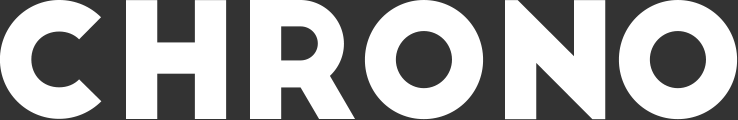
<style>
.page{position:relative;width:738px;height:120px;background:#ffffff}
.page>*{position:absolute;margin:0}
.t1{font:158.3px "BigJohn";color:#ffffff}
</style>
<div class="page">
<p class="t1" style="left:0px;top:0px;width:738px;height:120px">CHRONO</p>
</div>
